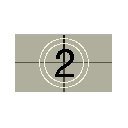
<style>
.page{position:relative;width:128px;height:128px;background:#ffffff}
.page>*{position:absolute;margin:0}
.t1{font:40px "Helvetica";letter-spacing:0.025em;color:#000000}
</style>
<div class="page">
<p class="t1" style="left:55px;top:49px;width:19px;height:28px">2</p>
</div>
